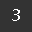
<style>
.page{position:relative;width:32px;height:32px;background:#333333}
.page>*{position:absolute;margin:0}
.t1{font:17.8px "MyriadPro-Regular";color:#ffffff;scale:1.12 1}
</style>
<div class="page">
<p class="t1" style="left:12px;top:9px;width:8px;height:12px">3</p>
</div>
